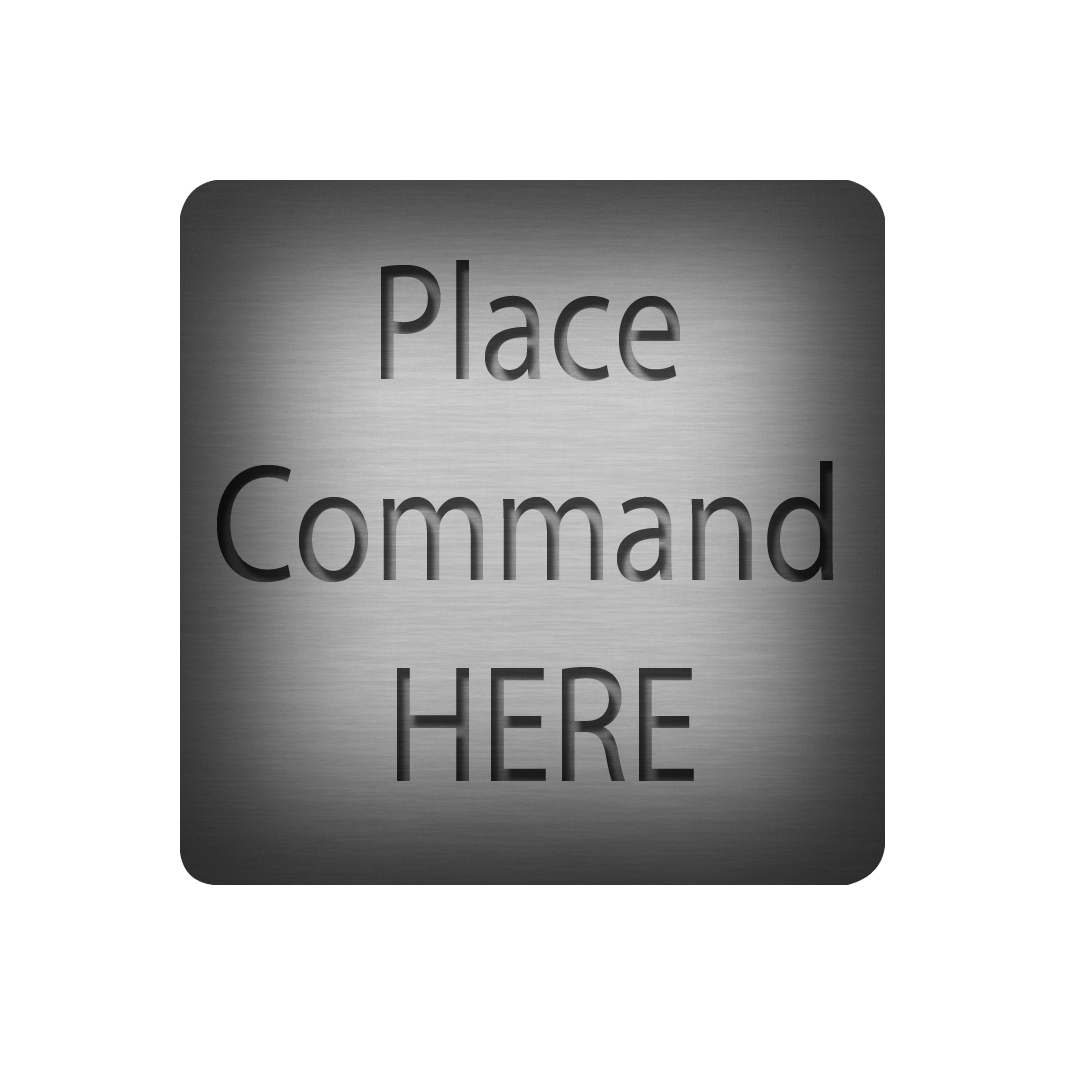
<style>
.page{position:relative;width:1065px;height:1065px;background:#ffffff}
.page>*{position:absolute;margin:0}
.t1{font:167.6px "MyriadPro-Regular";scale:0.86 1}
</style>
<div class="page">
<p class="t1" style="left:217px;top:260px;width:617px;height:521px;text-align:center">Place <br>Command <br>HERE</p>
</div>
